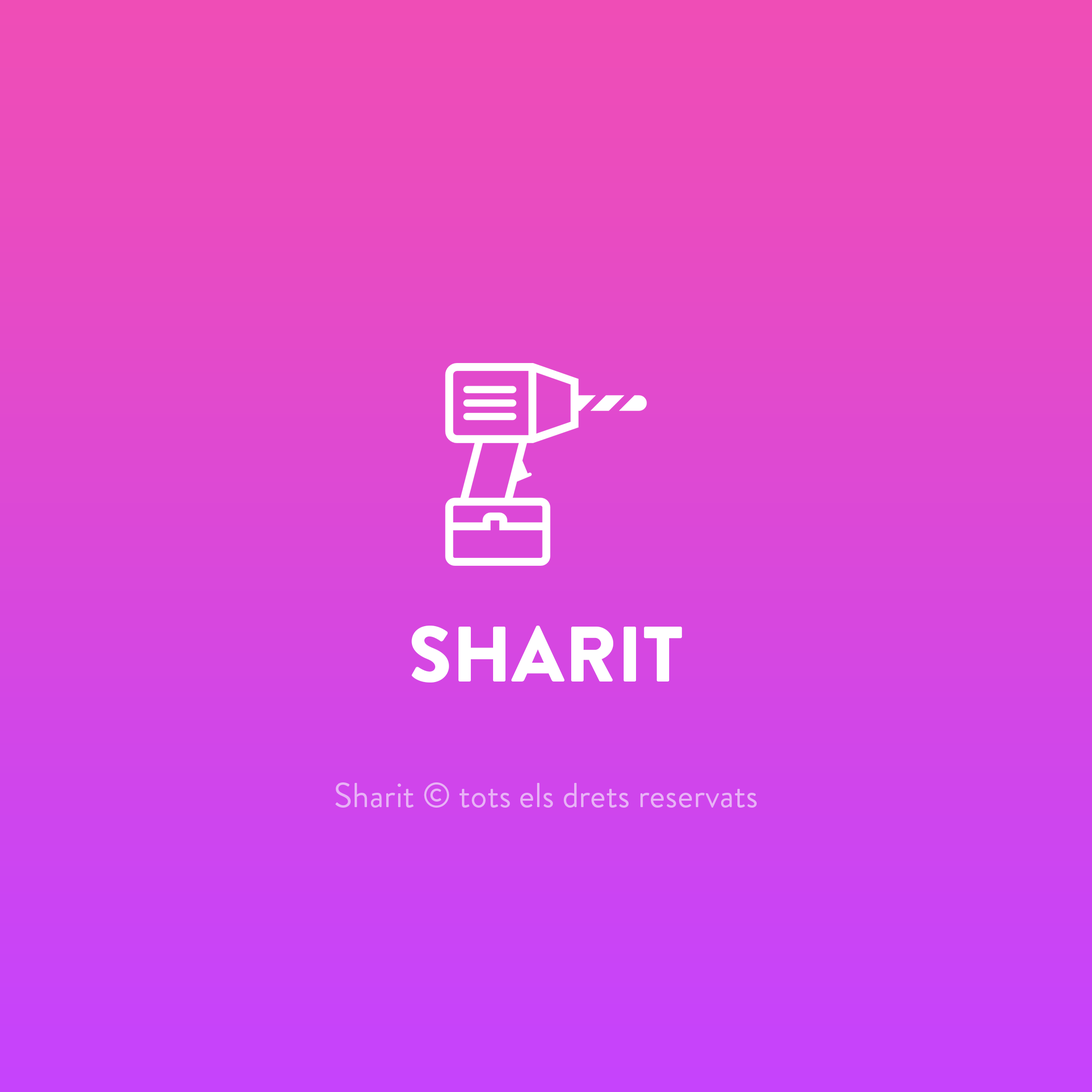
<style>
.page{position:relative;width:1092px;height:1092px}
.page>*{position:absolute;margin:0}
.t1{font:78.6px "BrandonGrotesque-Black";color:#ffffff}
.t2{font:34.6px "BrandonGrotesque-Regular";color:#e8b2f6}
</style>
<div class="page">
<p class="t1" style="left:411px;top:626px;width:271px;height:56px">SHARIT</p>
<p class="t2" style="left:335px;top:782px;width:422px;height:26px">Sharit © tots els drets reservats</p>
</div>
